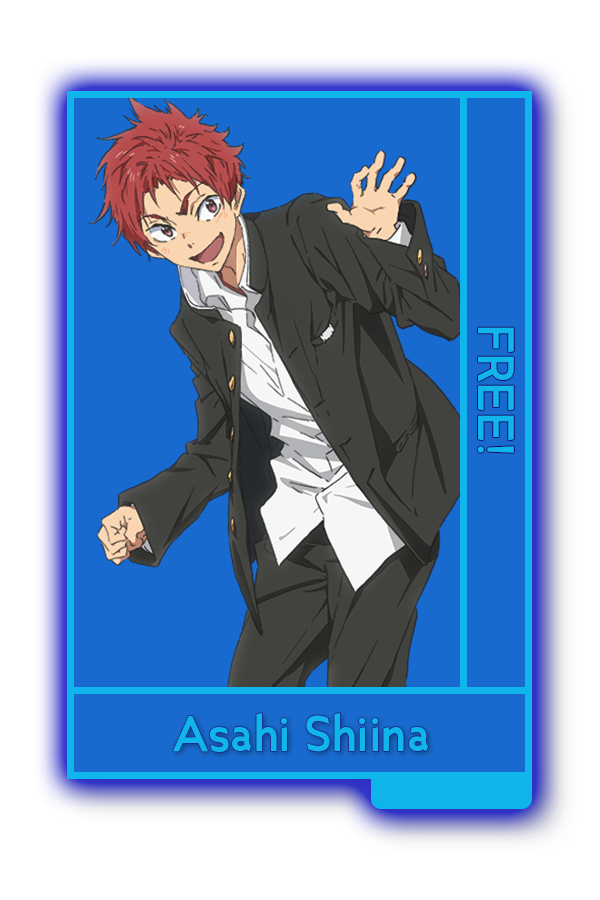
<style>
.page{position:relative;width:600px;height:900px;background:#196acf}
.page>*{position:absolute;margin:0}
.t1{font:47.8px "Ancillary-Bold";color:#0fb5eb}
.t2{font:46.7px "Ancillary-Bold";color:#0fb5eb}
</style>
<div class="page">
<p class="t1" style="left:477px;top:327px;width:37px;height:126px;rotate:90deg">FREE!</p>
<p class="t2" style="left:173px;top:713px;width:255px;height:39px">Asahi Shiina</p>
</div>
